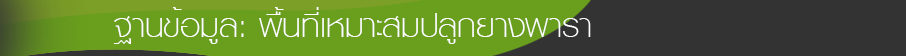
<style>
.page{position:relative;width:906px;height:56px;background:#333333}
.page>*{position:absolute;margin:0}
.t1{font:48px "KittithadaThin35P";color:#ffffff}
</style>
<div class="page">
<p class="t1" style="left:114px;top:7px;width:477px;height:37px">ฐานข้อมูล: พื้นที่เหมาะสมปลูกยางพารา</p>
</div>
